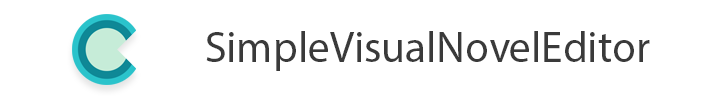
<style>
.page{position:relative;width:721px;height:99px;background:#ffffff}
.page>*{position:absolute;margin:0}
.t1{font:43.6px "MyriadPro-Regular";color:#3a3a3a}
</style>
<div class="page">
<p class="t1" style="left:206px;top:31px;width:444px;height:40px">SimpleVisualNovelEditor</p>
</div>
